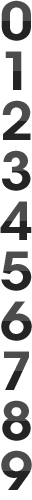
<style>
.page{position:relative;width:32px;height:500px;background:#ffffff}
.page>*{position:absolute;margin:0}
.t1{font:52px/50px "ITCAvantGardeStd-Demi";scale:1.05 1}
</style>
<div class="page">
<p class="t1" style="left:0px;top:0px;width:32px;height:490px;text-align:center">0<br>1<br>2<br>3<br>4<br>5<br>6<br>7<br>8<br>9</p>
</div>
